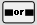
<style>
.page{position:relative;width:37px;height:25px;background:#f0f0f0}
.page>*{position:absolute;margin:0}
.t1{font:9px "Tahoma";color:#000000;font-weight:bold}
</style>
<div class="page">
<p class="t1" style="left:14px;top:10px;width:10px;height:5px">or</p>
</div>
